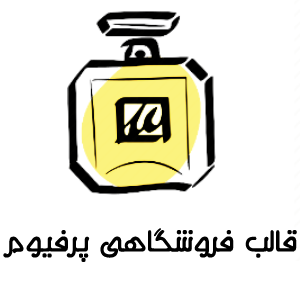
<style>
.page{position:relative;width:300px;height:300px;background:#ffffff}
.page>*{position:absolute;margin:0}
.t1{font:37.5px "MRT_Aman";color:#000000}
</style>
<div class="page">
<p class="t1" style="left:3px;top:228px;width:294px;height:34px">قالب فروشگاهی پرفیوم</p>
</div>
